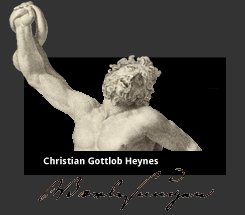
<style>
.page{position:relative;width:245px;height:215px;background:#333333}
.page>*{position:absolute;margin:0}
.t1{font:9.5px "DroidSans-Bold";color:#ffffff}
</style>
<div class="page">
<p class="t1" style="left:43px;top:156px;width:115px;height:11px">Christian Gottlob Heynes</p>
</div>
